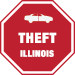
<style>
.page{position:relative;width:75px;height:75px;background:#bf202f}
.page>*{position:absolute;margin:0}
.t1{font:14px "HelveticaNeue-CondensedBlack";letter-spacing:0.05em;color:#ffffff}
.t2{font:9px "HelveticaNeue-CondensedBlack";letter-spacing:0.05em;color:#ffffff}
</style>
<div class="page">
<p class="t1" style="left:18px;top:32px;width:39px;height:11px">THEFT</p>
<p class="t2" style="left:20px;top:50px;width:34px;height:7px">ILLINOIS</p>
</div>
